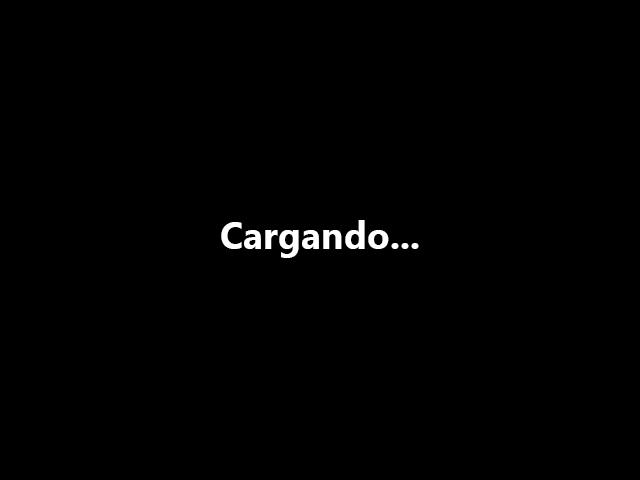
<style>
.page{position:relative;width:640px;height:480px;background:#000000}
.page>*{position:absolute;margin:0}
.t1{font:37.5px "SegoeUI-Bold";color:#ffffff}
</style>
<div class="page">
<p class="t1" style="left:221px;top:220px;width:198px;height:38px">Cargando...</p>
</div>
